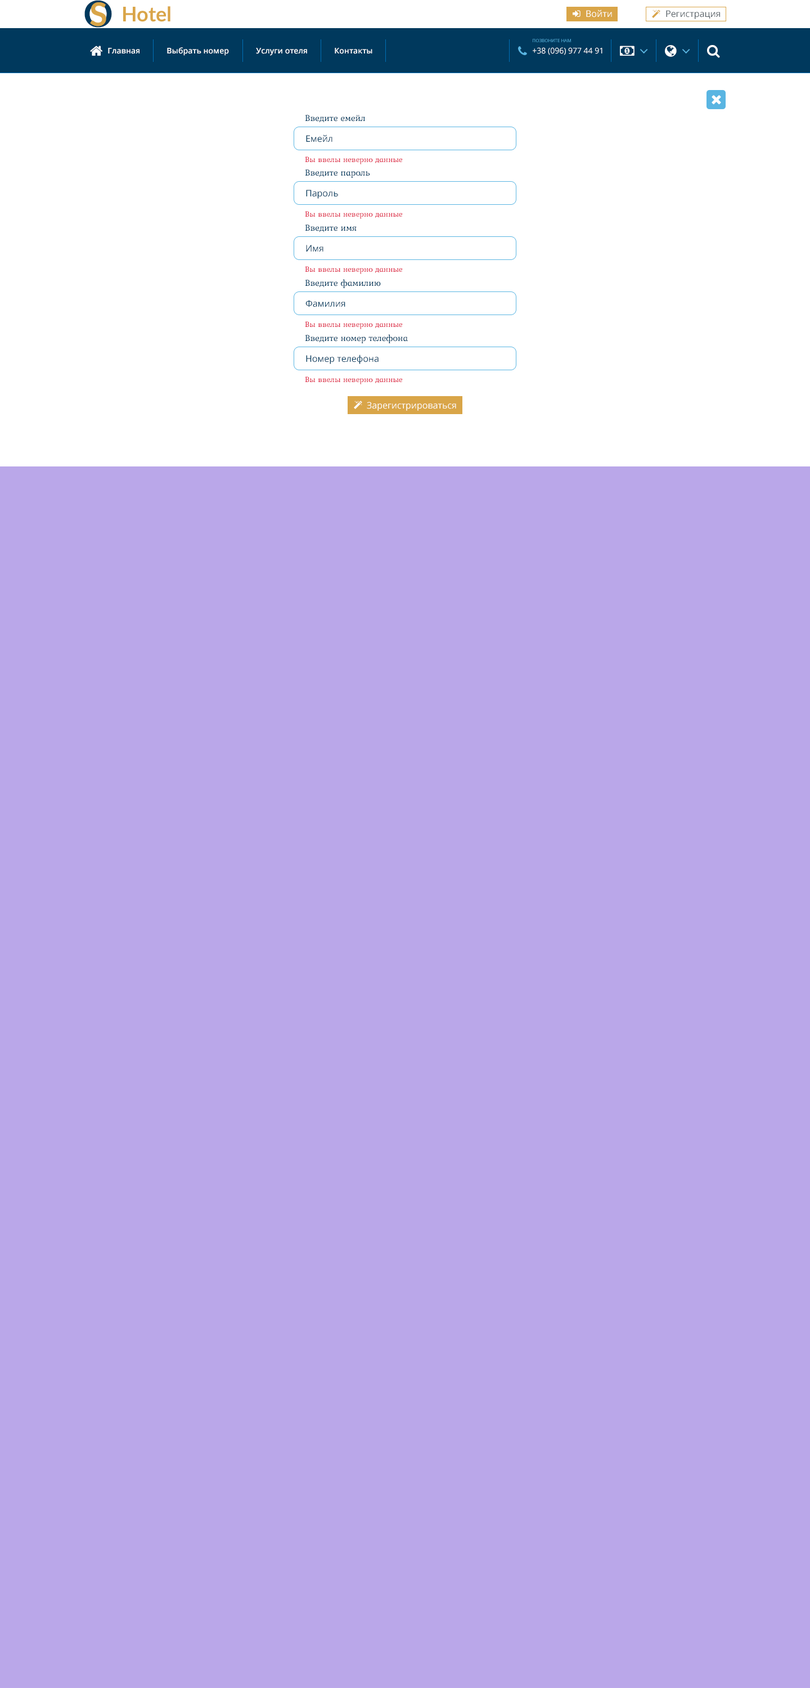
<style>
.page{position:relative;width:810px;height:1688px;background:#baa7e9}
.page>*{position:absolute;margin:0}
.t1{font:36.4px "Lato-Bold";color:#00395d}
.t2{font:32.3px "Lato-Bold";color:#d9a548}
.t3{font:20.2px "Lato-Bold";color:#d9a548}
.t4{font:9px "OpenSans";color:#ffffff}
.t5{font:9px "OpenSans";color:#565f65}
.t6{font:4.5px "OpenSans";color:#59b5e2;text-transform:uppercase}
.t7{font:7.9px "OpenSans-Semibold";color:#ffffff}
.t8{font:7.9px "OpenSans";color:#ffffff}
.t9{font:9px "Kurale-Regular";color:#00395d}
.t10{font:9px "OpenSans";color:#00395d}
.t11{font:7.9px "Kurale-Regular";color:#dc1b3b}
</style>
<div class="page">
<p class="t1" style="left:84px;top:0px;width:28px;height:28px">O</p>
<p class="t2" style="left:90px;top:2px;width:16px;height:24px">S</p>
<p class="t3" style="left:123px;top:6px;width:47px;height:16px">Hotel</p>
<p class="t4" style="left:586px;top:10px;width:26px;height:7px">Войти</p>
<p class="t5" style="left:666px;top:10px;width:54px;height:9px">Регистрация</p>
<p class="t6" style="left:533px;top:39px;width:38px;height:3px">Позвоните нам</p>
<p class="t7" style="left:108px;top:48px;width:32px;height:6px">Главная</p>
<p class="t7" style="left:167px;top:47px;width:62px;height:9px">Выбрать номер</p>
<p class="t7" style="left:256px;top:48px;width:51px;height:8px">Услуги отеля</p>
<p class="t7" style="left:335px;top:48px;width:37px;height:6px">Контакты</p>
<p class="t8" style="left:533px;top:47px;width:69px;height:8px">+38 (096) 977 44 91</p>
<p class="t9" style="left:305px;top:115px;width:60px;height:8px">Введите емейл</p>
<p class="t10" style="left:306px;top:134px;width:26px;height:8px">Емейл</p>
<p class="t11" style="left:305px;top:156px;width:97px;height:8px">Вы ввелы неверно данные</p>
<p class="t9" style="left:305px;top:169px;width:65px;height:9px">Введите пароль</p>
<p class="t10" style="left:306px;top:190px;width:32px;height:9px">Пароль</p>
<p class="t11" style="left:305px;top:211px;width:97px;height:8px">Вы ввелы неверно данные</p>
<p class="t9" style="left:305px;top:224px;width:52px;height:8px">Введите имя</p>
<p class="t10" style="left:306px;top:245px;width:17px;height:6px">Имя</p>
<p class="t11" style="left:305px;top:266px;width:97px;height:8px">Вы ввелы неверно данные</p>
<p class="t9" style="left:305px;top:279px;width:76px;height:9px">Введите фамилию</p>
<p class="t10" style="left:305px;top:300px;width:40px;height:7px">Фамилия</p>
<p class="t11" style="left:305px;top:321px;width:97px;height:8px">Вы ввелы неверно данные</p>
<p class="t9" style="left:305px;top:334px;width:103px;height:9px">Введите номер телефона</p>
<p class="t10" style="left:306px;top:354px;width:73px;height:10px">Номер телефона</p>
<p class="t11" style="left:305px;top:376px;width:97px;height:8px">Вы ввелы неверно данные</p>
<p class="t4" style="left:367px;top:402px;width:89px;height:9px">Зарегистрироваться</p>
</div>
